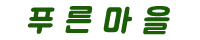
<style>
.page{position:relative;width:200px;height:40px;background:#ffffff}
.page>*{position:absolute;margin:0}
.t1{font:33.3px "BMJUA";letter-spacing:-0.05em;color:#1b5c07;font-style:italic}
</style>
<div class="page">
<p class="t1" style="left:27px;top:6px;width:143px;height:29px">푸  른  마  을</p>
</div>
